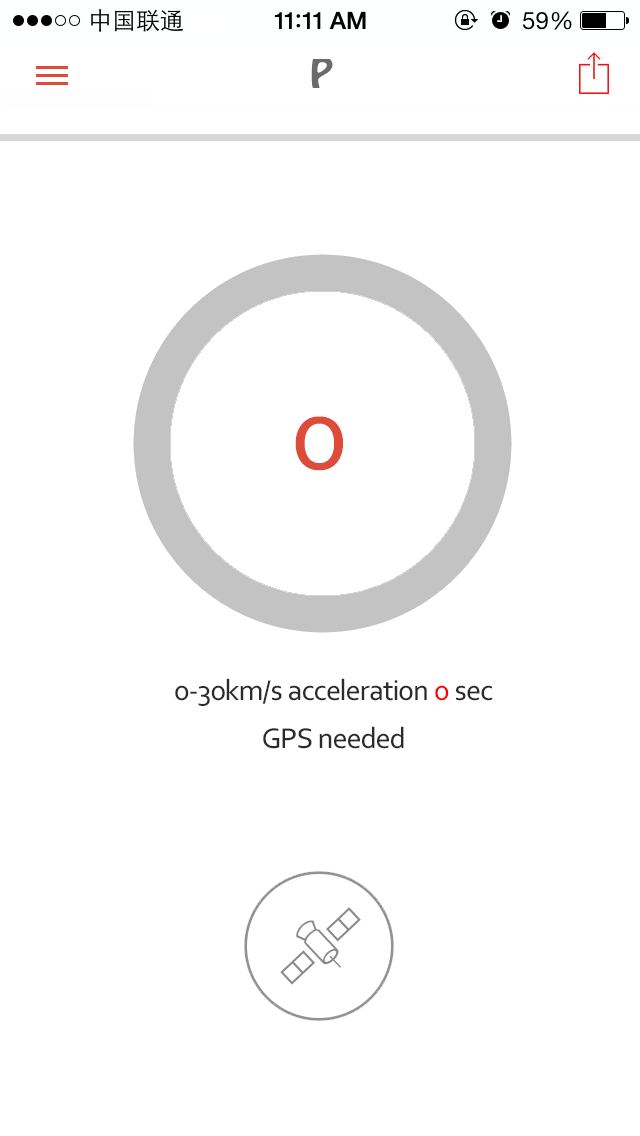
<style>
.page{position:relative;width:640px;height:1136px;background:#ffffff}
.page>*{position:absolute;margin:0}
.t1{font:36px "HoboStd";color:#6b6b6b}
.t2{font:110.5px "Corbel";color:#dd4b39}
.t3{font:30px/48px "Corbel";color:#2b2b2b}
.t4{font:30px/48px "Corbel";color:#ff0000}
</style>
<div class="page">
<p class="t1" style="left:311px;top:58px;width:22px;height:30px">P</p>
<p class="t2" style="left:295px;top:416px;width:48px;height:55px">0</p>
<p class="t3" style="left:175px;top:678px;width:318px;height:71px;text-align:center">0-30km/s acceleration <span class="t4">0</span> sec<br>GPS needed</p>
</div>
